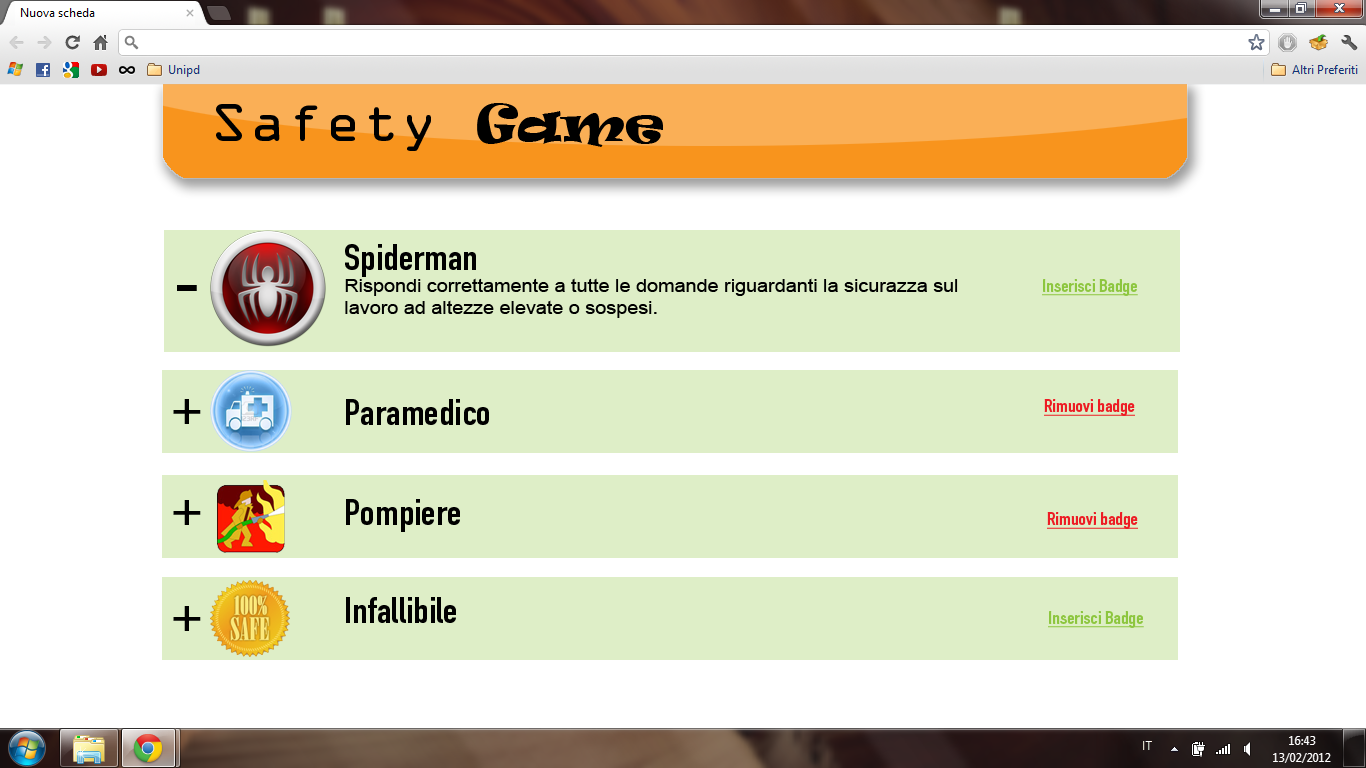
<style>
.page{position:relative;width:1366px;height:768px;background:#ffffff}
.page>*{position:absolute;margin:0}
.t1{font:48px "OCRAStd";color:#000000;scale:1.1 1}
.t2{font:48px "Ravie";color:#000000;scale:1.1 1}
.t3{font:18px "ArialMT";color:#000000;scale:1.1 1}
.t4{font:36px "DINEngschriftStd";color:#000000;scale:1.1 1}
.t5{font:18px "DINEngschriftStd";color:#8dc63f;text-decoration:underline;scale:1.1 1}
.t6{font:60px "DINEngschriftStd";color:#000000;scale:1.1 1}
.t7{font:48px "DINEngschriftStd";color:#000000;scale:1.1 1}
.t8{font:18px "DINEngschriftStd";color:#ed1c24;text-decoration:underline;scale:1.1 1}
</style>
<div class="page">
<p class="t1" style="left:216px;top:103px;width:447px;height:48px">Safety <span class="t2">Game</span></p>
<p class="t3" style="left:345px;top:244px;width:613px;height:74px"><span class="t4">Spiderman<br></span>Rispondi correttamente a tutte le domande riguardanti la sicurazza sul lavoro ad altezze elevate o sospesi.</p>
<p class="t5" style="left:1042px;top:279px;width:96px;height:17px">Inserisci Badge</p>
<p class="t6" style="left:177px;top:285px;width:20px;height:6px">-</p>
<p class="t7" style="left:173px;top:399px;width:28px;height:25px">+</p>
<p class="t4" style="left:346px;top:399px;width:143px;height:26px">Paramedico</p>
<p class="t8" style="left:1044px;top:399px;width:91px;height:17px">Rimuovi badge</p>
<p class="t7" style="left:173px;top:500px;width:28px;height:25px">+</p>
<p class="t4" style="left:346px;top:499px;width:114px;height:33px">Pompiere</p>
<p class="t8" style="left:1047px;top:512px;width:91px;height:17px">Rimuovi badge</p>
<p class="t7" style="left:173px;top:606px;width:28px;height:25px">+</p>
<p class="t4" style="left:346px;top:597px;width:110px;height:26px">Infallibile</p>
<p class="t5" style="left:1048px;top:611px;width:96px;height:17px">Inserisci Badge</p>
</div>
